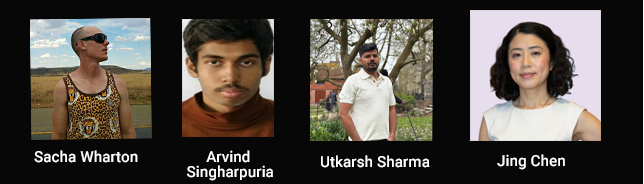
<style>
.page{position:relative;width:644px;height:184px;background:#070707}
.page>*{position:absolute;margin:0}
.t1{font:15.3px "Roboto-Medium";color:#ffffff}
.t2{font:15.3px/15.3px "Roboto-Medium";color:#ffffff}
</style>
<div class="page">
<p class="t1" style="left:34px;top:150px;width:104px;height:13px">Sacha Wharton</p>
<p class="t2" style="left:187px;top:150px;width:86px;height:31px;text-align:center">Arvind<br> Singharpuria</p>
<p class="t1" style="left:321px;top:155px;width:109px;height:13px">Utkarsh Sharma</p>
<p class="t1" style="left:497px;top:154px;width:68px;height:16px">Jing Chen</p>
</div>
